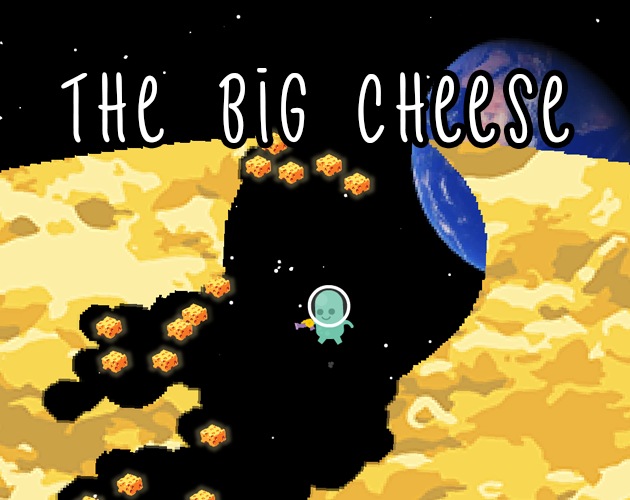
<style>
.page{position:relative;width:630px;height:500px;background:#000000}
.page>*{position:absolute;margin:0}
.t1{font:106.7px "CactusStory";color:#ffffff}
</style>
<div class="page">
<p class="t1" style="left:61px;top:68px;width:508px;height:75px">The Big Cheese</p>
</div>
